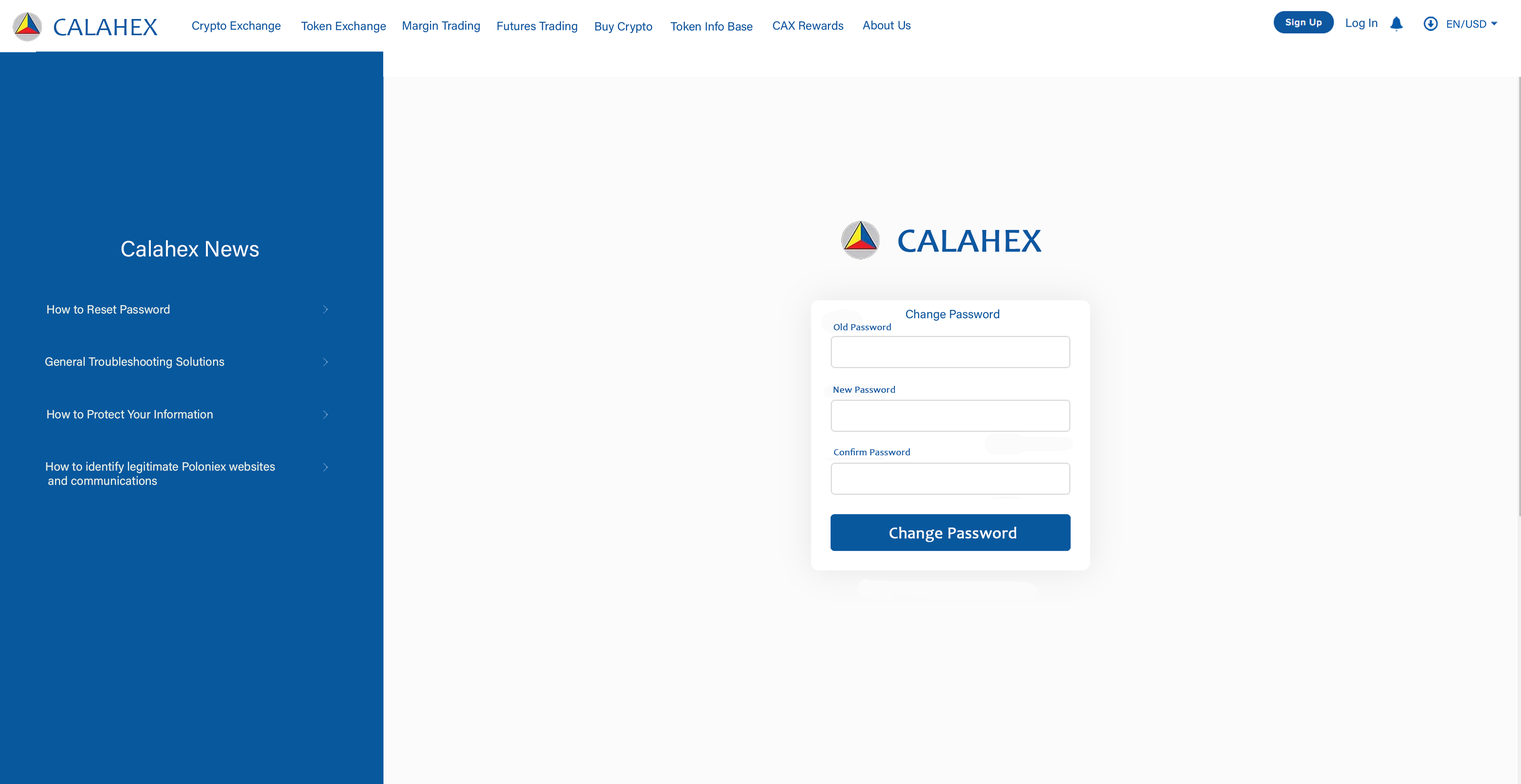
<style>
.page{position:relative;width:1521px;height:784px;background:#fbfbfb}
.page>*{position:absolute;margin:0}
.t1{font:25.6px "Candara";color:#0d57a0}
.t2{font:11.9px "AcuminConcept-Regular";color:#0d57a0;font-style:italic}
.t3{font:10.7px "AcuminConcept-Regular";color:#055aaa;font-style:italic}
.t4{font:33.7px "Candara";color:#0d57a0;font-weight:bold}
.t5{font:22.2px "AcuminConcept-Regular";color:#fbfbfb;font-style:italic}
.t6{font:11.9px "AcuminConcept-Regular";color:#e5f0e6;font-style:italic}
.t7{font:11.9px "AcuminConcept-Regular";color:#08589e;font-style:italic}
.t8{font:9.5px "Candara";color:#0d57a0;font-weight:bold}
.t9{font:16.2px "Candara";color:#fbfbfb;font-weight:bold}
</style>
<div class="page">
<p class="t1" style="left:54px;top:19px;width:104px;height:17px">CALAHEX</p>
<p class="t2" style="left:192px;top:21px;width:89px;height:11px">Crypto Exchange</p>
<p class="t2" style="left:301px;top:21px;width:85px;height:12px">Token Exchange</p>
<p class="t2" style="left:403px;top:21px;width:77px;height:11px">Margin Trading</p>
<p class="t2" style="left:497px;top:21px;width:80px;height:12px">Futures Trading</p>
<p class="t2" style="left:595px;top:22px;width:57px;height:11px">Buy Crypto</p>
<p class="t2" style="left:671px;top:21px;width:81px;height:10px">Token Info Base</p>
<p class="t2" style="left:773px;top:21px;width:70px;height:9px">CAX Rewards</p>
<p class="t2" style="left:862px;top:20px;width:49px;height:10px">About Us</p>
<p class="t2" style="left:1346px;top:19px;width:31px;height:11px">Log In</p>
<p class="t3" style="left:1447px;top:20px;width:39px;height:8px">EN/USD</p>
<p class="t4" style="left:898px;top:230px;width:143px;height:22px">CALAHEX</p>
<p class="t5" style="left:122px;top:240px;width:137px;height:17px">Calahex News</p>
<p class="t6" style="left:47px;top:304px;width:122px;height:10px">How to Reset Password</p>
<p class="t7" style="left:906px;top:309px;width:93px;height:12px">Change Password</p>
<p class="t8" style="left:834px;top:323px;width:57px;height:8px">Old Password</p>
<p class="t6" style="left:45px;top:357px;width:179px;height:12px">General Troubleshooting Solutions</p>
<p class="t8" style="left:833px;top:386px;width:62px;height:7px">New Password</p>
<p class="t6" style="left:47px;top:409px;width:166px;height:10px">How to Protect Your Information</p>
<p class="t8" style="left:834px;top:448px;width:76px;height:8px">Confirm Password</p>
<p class="t6" style="left:46px;top:462px;width:229px;height:23px">How to identify legitimate Poloniex websites<br> and communications</p>
<p class="t9" style="left:889px;top:527px;width:127px;height:15px">Change Password</p>
</div>
